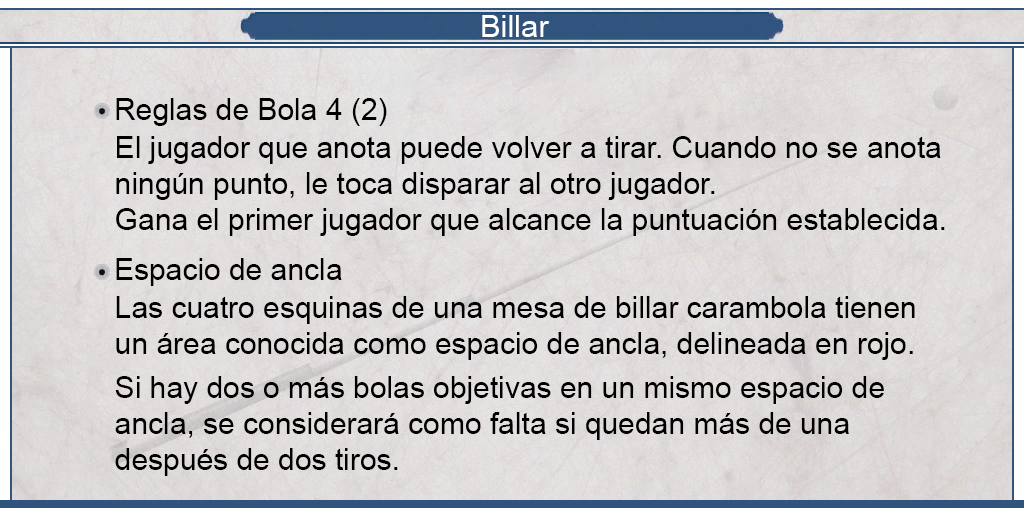
<style>
.page{position:relative;width:1024px;height:512px}
.page>*{position:absolute;margin:0}
.t1{font:30.8px "ArialMT";color:#ffffff}
.t2{font:30px "ArialMT";color:#000000}
</style>
<div class="page">
<p class="t1" style="left:482px;top:15px;width:68px;height:22px">Billar</p>
<p class="t2" style="left:116px;top:98px;width:271px;height:28px">Reglas de Bola 4 (2)</p>
<p class="t2" style="left:116px;top:136px;width:829px;height:100px">El jugador que anota puede volver a tirar. Cuando no se anota ningún punto, le toca disparar al otro jugador.<br>Gana el primer jugador que alcance la puntuación establecida.</p>
<p class="t2" style="left:116px;top:258px;width:226px;height:28px">Espacio de ancla</p>
<p class="t2" style="left:115px;top:296px;width:800px;height:180px">Las cuatro esquinas de una mesa de billar carambola tienen un área conocida como espacio de ancla, delineada en rojo. <br><br>Si hay dos o más bolas objetivas en un mismo espacio de <br>ancla, se considerará como falta si quedan más de una <br>después de dos tiros.</p>
</div>
